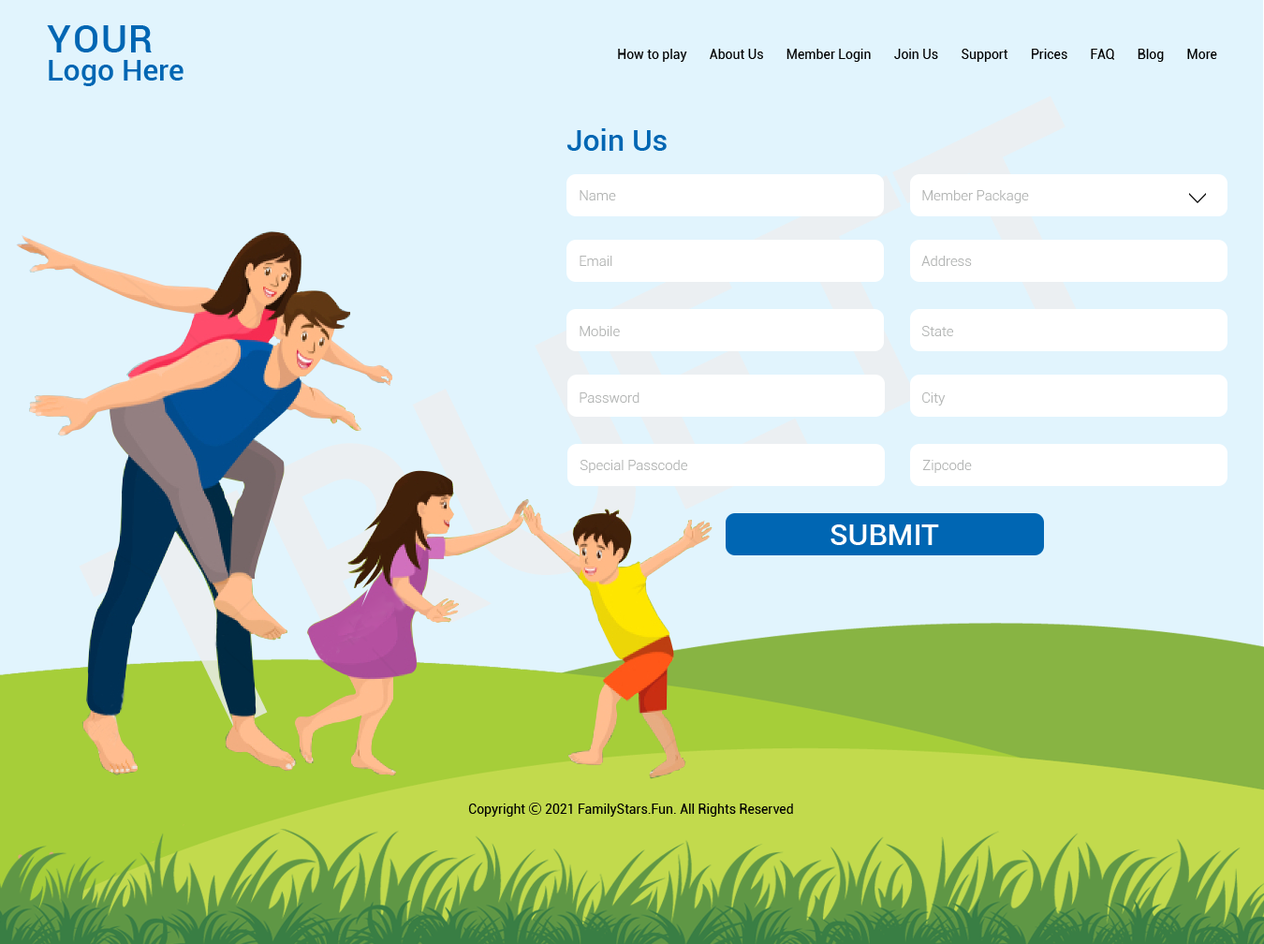
<style>
.page{position:relative;width:1264px;height:944px;background:#e1f4fd}
.page>*{position:absolute;margin:0}
.t1{font:29.8px/28.1px "Roboto-Medium";color:#0066b3}
.t2{font:38.3px/28.1px "Roboto-Medium";letter-spacing:0.05em;color:#0066b3}
.t3{font:13.1px "Roboto-Regular";color:#000000}
.t4{font:29.8px "Roboto-Medium";color:#0066b3}
.t5{font:13.9px "Roboto-Light";color:#b3b5b4}
.t6{font:29.8px "Roboto-Medium";color:#ffffff}
.t7{font:13.1px "KozGoPr6N-Regular";color:#000000}
</style>
<div class="page">
<p class="t1" style="left:47px;top:25px;width:136px;height:61px"><span class="t2">YOUR <br></span>Logo Here</p>
<p class="t3" style="left:618px;top:49px;width:599px;height:13px">How to play       About Us       Member Login       Join Us       Support       Prices       FAQ       Blog       More</p>
<p class="t4" style="left:566px;top:128px;width:100px;height:23px">Join Us</p>
<p class="t5" style="left:579px;top:190px;width:37px;height:10px">Name</p>
<p class="t5" style="left:922px;top:190px;width:107px;height:13px">Member Package</p>
<p class="t5" style="left:579px;top:256px;width:33px;height:10px">Email</p>
<p class="t5" style="left:921px;top:256px;width:51px;height:10px">Address</p>
<p class="t5" style="left:579px;top:326px;width:41px;height:10px">Mobile</p>
<p class="t5" style="left:921px;top:326px;width:32px;height:10px">State</p>
<p class="t5" style="left:579px;top:392px;width:60px;height:11px">Password</p>
<p class="t5" style="left:922px;top:392px;width:23px;height:13px">City</p>
<p class="t5" style="left:579px;top:460px;width:108px;height:13px">Special Passcode</p>
<p class="t5" style="left:922px;top:460px;width:50px;height:13px">Zipcode</p>
<p class="t6" style="left:830px;top:524px;width:109px;height:21px">SUBMIT</p>
<p class="t3" style="left:468px;top:802px;width:325px;height:14px">Copyright <span class="t7">Ⓒ</span> 2021 FamilyStars.Fun. All Rights Reserved</p>
</div>
